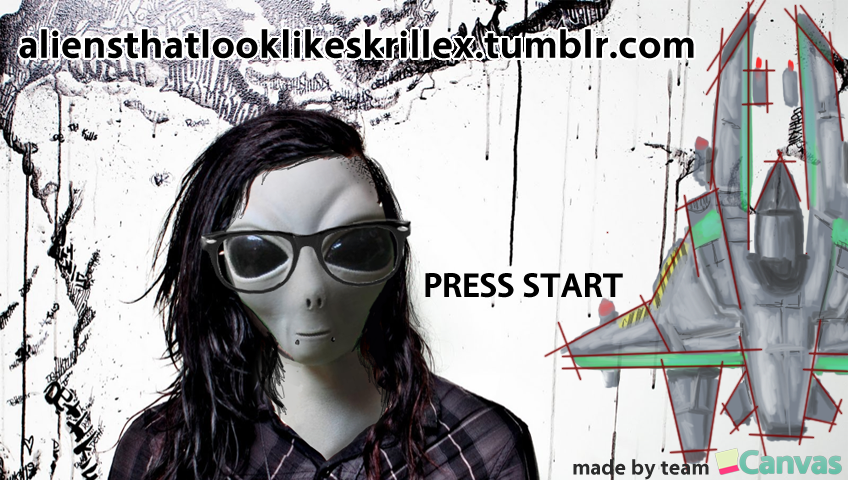
<style>
.page{position:relative;width:848px;height:480px}
.page>*{position:absolute;margin:0}
.t1{font:40.6px "Vegur-Bold";color:#000000}
.t2{font:36px "Vegur-Bold";color:#000000}
.t3{font:21.7px "Vegur-Bold";color:#2b2b2b}
</style>
<div class="page">
<p class="t1" style="left:19px;top:29px;width:675px;height:30px">aliensthatlooklikeskrillex.tumblr.com</p>
<p class="t2" style="left:425px;top:273px;width:198px;height:25px">PRESS START</p>
<p class="t3" style="left:573px;top:459px;width:136px;height:21px">made by team</p>
</div>
